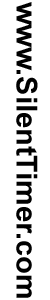
<style>
.page{position:relative;width:50px;height:300px;background:#ffffff}
.page>*{position:absolute;margin:0}
.t1{font:29px "Arial-BoldMT";color:#000000}
</style>
<div class="page">
<p class="t1" style="left:16px;top:2px;width:22px;height:296px;rotate:90deg">www.SilentTimer.com</p>
</div>
